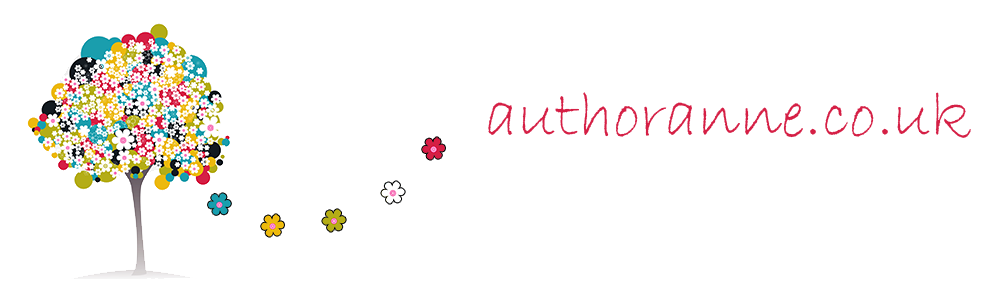
<style>
.page{position:relative;width:1000px;height:282px;background:#ffffff}
.page>*{position:absolute;margin:0}
.t1{font:66.8px "BradleyHandITC";color:#d51f45}
</style>
<div class="page">
<p class="t1" style="left:488px;top:92px;width:483px;height:46px">authoranne.co.uk</p>
</div>
